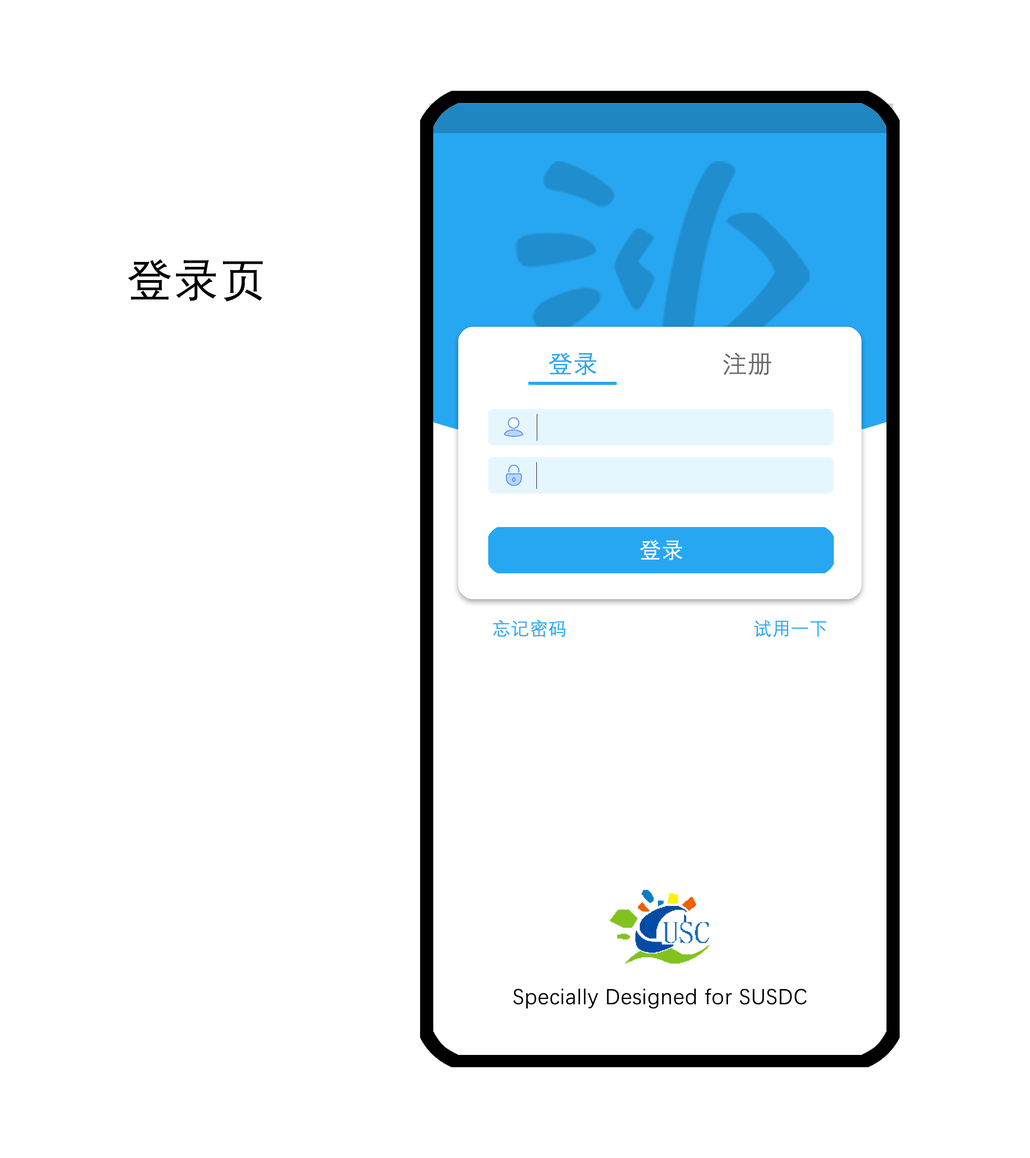
<style>
.page{position:relative;width:1030px;height:1158px;background:#ffffff}
.page>*{position:absolute;margin:0}
.t1{font:45.4px "DengXian";color:#000000;font-weight:bold}
.t2{font:24.5px "DengXian";color:#27a7f2;font-weight:bold}
.t3{font:24.5px "DengXian";color:#6b6b6b;font-weight:bold}
.t4{font:21.8px "DengXian";color:#ffffff;font-weight:bold}
.t5{font:18.2px "DengXian";color:#27a7f2;font-weight:bold}
.t6{font:21.8px "DengXian";color:#000000;font-weight:bold}
</style>
<div class="page">
<p class="t1" style="left:128px;top:259px;width:135px;height:42px">登录页</p>
<p class="t2" style="left:548px;top:352px;width:49px;height:23px">登录</p>
<p class="t3" style="left:723px;top:352px;width:48px;height:23px">注册</p>
<p class="t4" style="left:640px;top:540px;width:42px;height:20px">登录</p>
<p class="t5" style="left:493px;top:620px;width:72px;height:17px">忘记密码</p>
<p class="t5" style="left:754px;top:620px;width:72px;height:17px">试用一下</p>
<p class="t6" style="left:513px;top:988px;width:293px;height:21px">Specially Designed for SUSDC</p>
</div>
